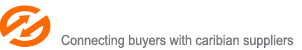
<style>
.page{position:relative;width:302px;height:50px;background:#ffffff}
.page>*{position:absolute;margin:0}
.t1{font:14px "ArialMT";color:#75797d;scale:0.9 1}
</style>
<div class="page">
<p class="t1" style="left:61px;top:34px;width:233px;height:14px">Connecting buyers with caribian suppliers</p>
</div>
